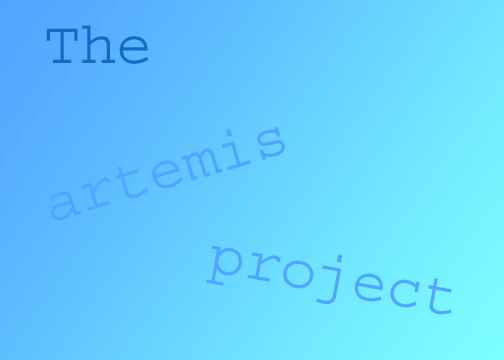
<style>
.page{position:relative;width:504px;height:360px}
.page>*{position:absolute;margin:0}
.t1{font:60px "Courier";color:#156bc4}
.t2{font:60px "Courier";color:#51a5ff}
</style>
<div class="page">
<p class="t1" style="left:46px;top:25px;width:102px;height:39px">The</p>
<p class="t2" style="left:49px;top:127px;width:236px;height:94px;rotate:-17deg">artemis</p>
<p class="t2" style="left:206px;top:245px;width:246px;height:70px;rotate:10deg">project</p>
</div>
